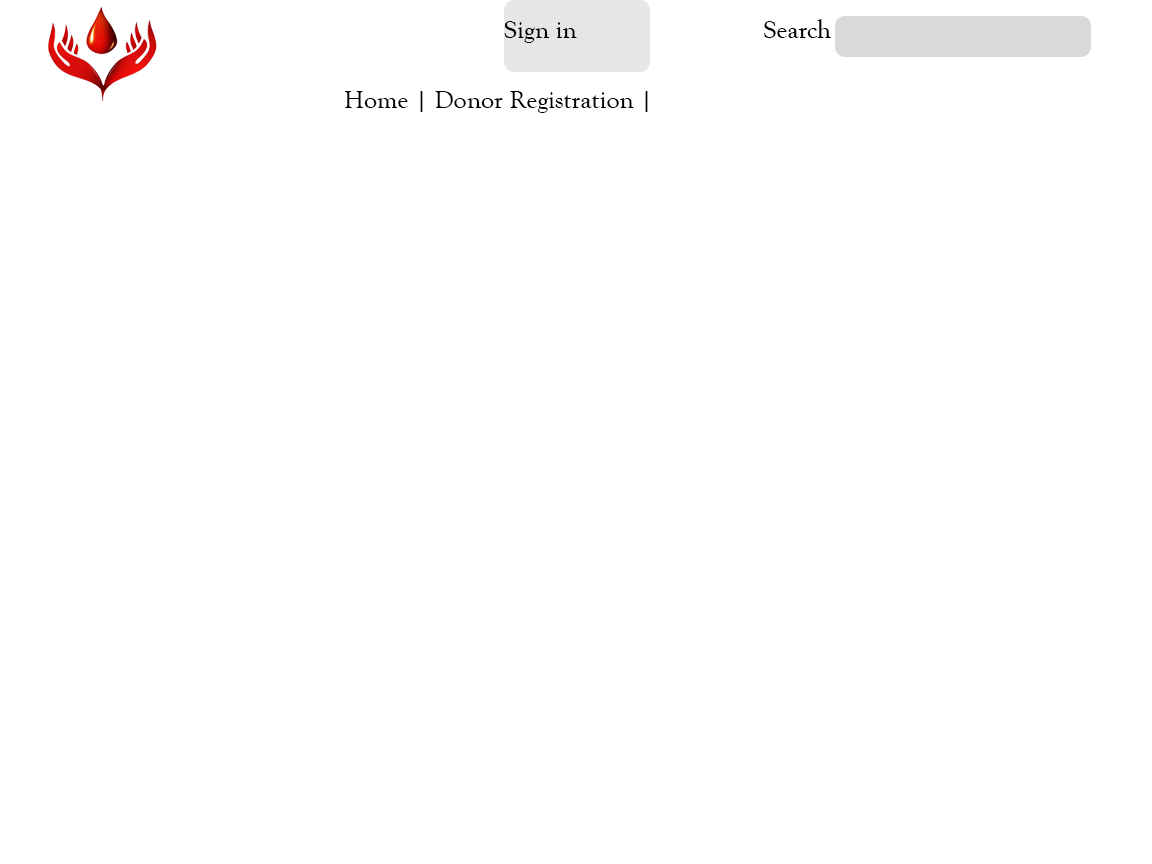
<style>
.page{position:relative;width:1152px;height:864px;background:#ffffff}
.page>*{position:absolute;margin:0}
.t1{font:26px "GoudyOldStyleT-Regular";color:#000000}
</style>
<div class="page">
<p class="t1" style="left:504px;top:21px;width:73px;height:22px">Sign in</p>
<p class="t1" style="left:764px;top:19px;width:67px;height:19px">Search</p>
<p class="t1" style="left:344px;top:91px;width:304px;height:22px">Home | Donor Registration |</p>
</div>
